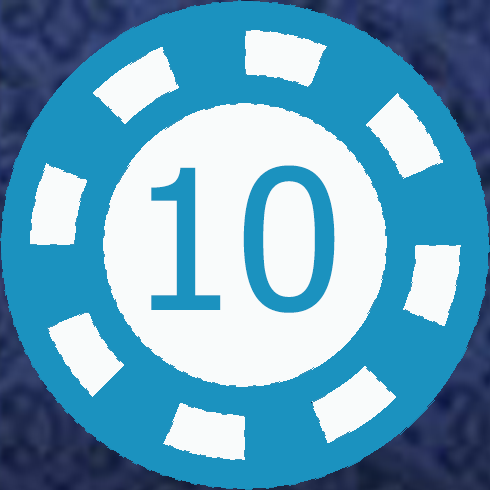
<style>
.page{position:relative;width:490px;height:490px;background:#1b92bf}
.page>*{position:absolute;margin:0}
.t1{font:194.4px "Tahoma";color:#1b92bf}
</style>
<div class="page">
<p class="t1" style="left:151px;top:165px;width:184px;height:148px">10</p>
</div>
